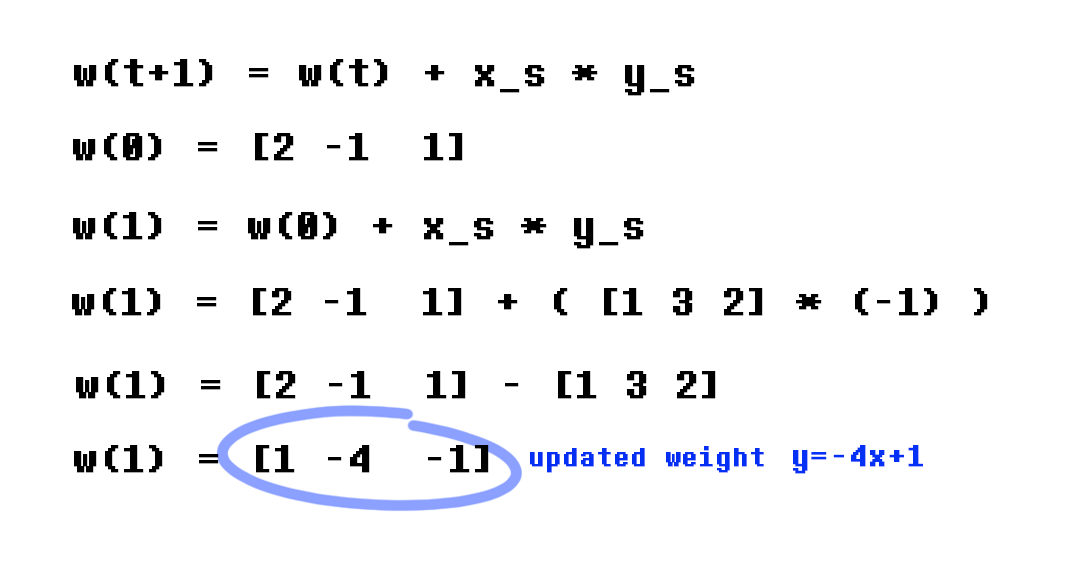
<style>
.page{position:relative;width:1080px;height:587px;background:#ffffff}
.page>*{position:absolute;margin:0}
.t1{font:40px "DeterminationMono";color:#000000;font-weight:bold}
.t2{font:27.1px "DeterminationMono";color:#032ff4;font-weight:bold}
.t3{font:30.8px "DeterminationMono";color:#0531f6;font-weight:bold}
</style>
<div class="page">
<p class="t1" style="left:74px;top:59px;width:621px;height:37px">w(t+1) = w(t) + x_s * y_s</p>
<p class="t1" style="left:73px;top:133px;width:390px;height:28px">w(0) = [2 -1  1]</p>
<p class="t1" style="left:73px;top:212px;width:571px;height:37px">w(1) = w(0) + x_s * y_s</p>
<p class="t1" style="left:72px;top:288px;width:916px;height:28px">w(1) = [2 -1  1] + ( [1 3 2] * (-1) )</p>
<p class="t1" style="left:76px;top:371px;width:640px;height:28px">w(1) = [2 -1  1] - [1 3 2]</p>
<p class="t1" style="left:74px;top:445px;width:415px;height:28px">w(1) = [1 -4  -1]</p>
<p class="t2" style="left:530px;top:446px;width:234px;height:27px">updated weight</p>
<p class="t3" style="left:793px;top:445px;width:130px;height:29px">y=-4x+1</p>
</div>
